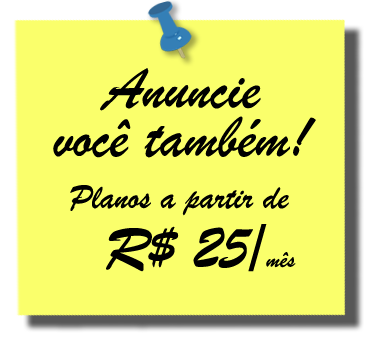
<style>
.page{position:relative;width:374px;height:340px;background:#faff6b}
.page>*{position:absolute;margin:0}
.t1{font:60.9px/48.7px "BrushScriptMT";color:#000000}
.t2{font:36px "BrushScriptMT";color:#000000}
.t3{font:63.7px "BrushScriptMT";color:#000000}
.t4{font:24.8px "BrushScriptMT";color:#000000}
</style>
<div class="page">
<p class="t1" style="left:53px;top:68px;width:263px;height:90px;text-align:center">Anuncie<br>você também!</p>
<p class="t2" style="left:70px;top:185px;width:219px;height:31px">Planos a partir de</p>
<p class="t3" style="left:106px;top:224px;width:190px;height:48px">R$ 25/<span class="t4">mês</span></p>
</div>
